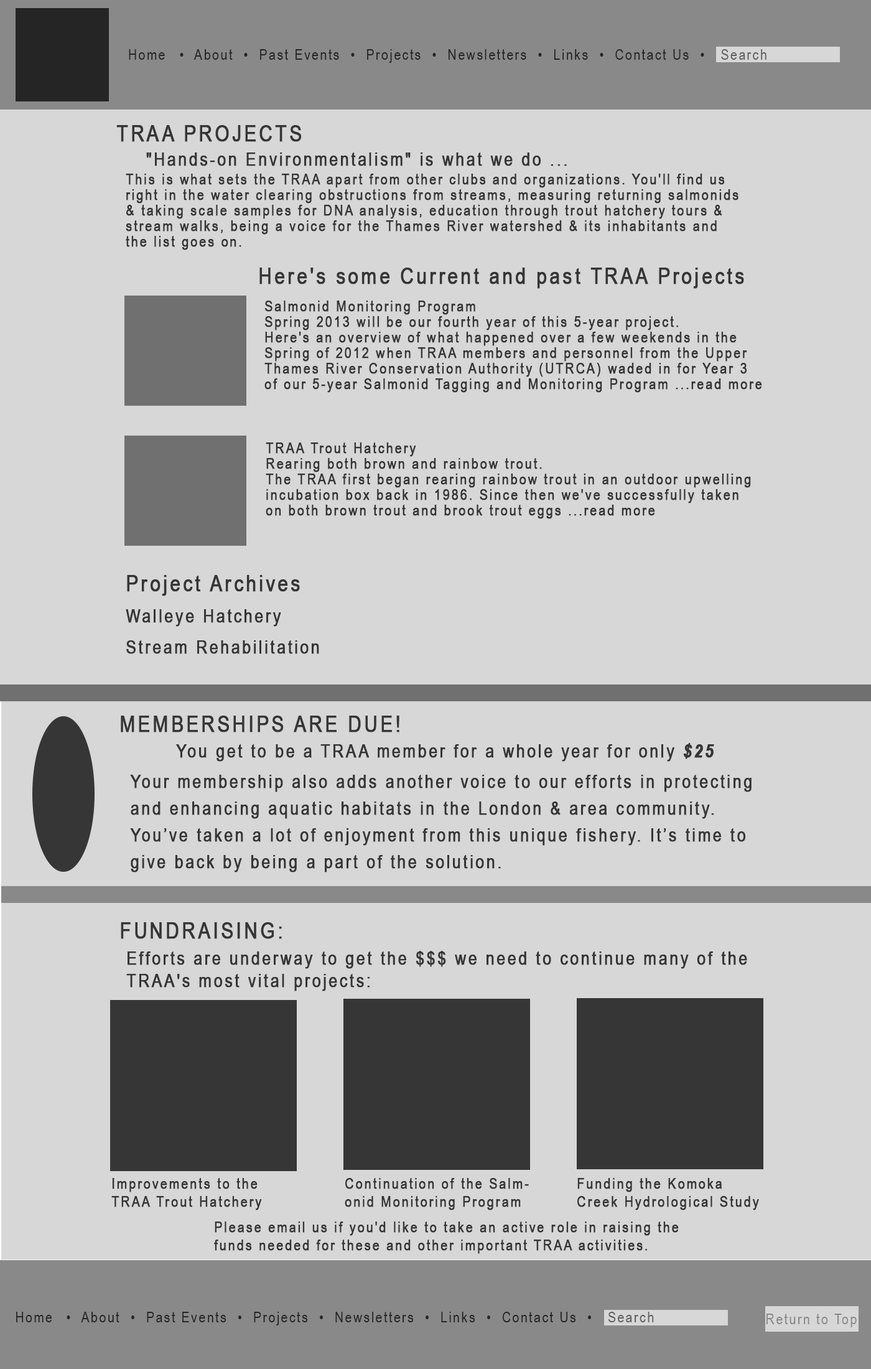
<style>
.page{position:relative;width:871px;height:1369px;background:#d7d7d7}
.page>*{position:absolute;margin:0}
.t1{font:14.9px "ArialNarrow";letter-spacing:0.1em;color:#252525}
.t2{font:14.9px "ArialNarrow";letter-spacing:0.1em;color:#5f5f5f}
.t3{font:22.4px "ArialNarrow";letter-spacing:0.1em;color:#363636;text-transform:uppercase;font-weight:bold}
.t4{font:18.7px "ArialNarrow";letter-spacing:0.1em;color:#363636;font-weight:bold}
.t5{font:14.9px/15.6px "ArialNarrow";letter-spacing:0.1em;color:#363636;font-weight:bold}
.t6{font:22.4px "ArialNarrow";letter-spacing:0.1em;color:#363636;font-weight:bold}
.t7{font:18.7px/15.6px "ArialNarrow";letter-spacing:0.1em;color:#363636;font-weight:bold}
.t8{font:22.4px/15.6px "ArialNarrow";letter-spacing:0.1em;color:#363636;font-weight:bold}
.t9{font:18.7px "ArialNarrow-BoldItalic";letter-spacing:0.1em;color:#363636;font-weight:bold}
.t10{font:18.7px/26.8px "ArialNarrow";letter-spacing:0.1em;color:#363636;font-weight:bold}
.t11{font:14.9px "ArialNarrow";letter-spacing:0.1em;color:#363636;font-weight:bold}
.t12{font:14.9px "ArialNarrow";letter-spacing:0.1em;color:#898989}
.t13{font:10px "ArialNarrow";letter-spacing:0.1em;color:#898989}
</style>
<div class="page">
<p class="t1" style="left:129px;top:49px;width:638px;height:14px">Home  •  About  •  Past Events  •  Projects  •  Newsletters  •  Links  •  Contact Us  •   <span class="t2">Search</span></p>
<p class="t3" style="left:116px;top:125px;width:186px;height:17px">TRAA Projects</p>
<p class="t4" style="left:146px;top:152px;width:421px;height:14px">"Hands-on Environmentalism" is what we do ...</p>
<p class="t5" style="left:126px;top:174px;width:613px;height:76px">This is what sets the TRAA apart from other clubs and organizations. You'll find us <br>right in the water clearing obstructions from streams, measuring returning salmonids<br>&amp; taking scale samples for DNA analysis, education through trout hatchery tours &amp; <br>stream walks, being a voice for the Thames River watershed &amp; its inhabitants and <br>the list goes on.</p>
<p class="t6" style="left:259px;top:268px;width:485px;height:21px">Here's some Current and past TRAA Projects</p>
<p class="t5" style="left:264px;top:301px;width:498px;height:92px">Salmonid Monitoring Program<br>Spring 2013 will be our fourth year of this 5-year project.<br>Here's an overview of what happened over a few weekends in the <br>Spring of 2012 when TRAA members and personnel from the Upper <br>Thames River Conservation Authority (UTRCA) waded in for Year 3 <br>of our 5-year Salmonid Tagging and Monitoring Program ...read more</p>
<p class="t5" style="left:266px;top:442px;width:485px;height:77px">TRAA Trout Hatchery<br>Rearing both brown and rainbow trout.<br>The TRAA first began rearing rainbow trout in an outdoor upwelling <br>incubation box back in 1986. Since then we've successfully taken <br>on both brown trout and brook trout eggs ...read more</p>
<p class="t7" style="left:126px;top:575px;width:193px;height:79px"><span class="t8">Project Archives<br><br></span>Walleye Hatchery<br><br>Stream Rehabilitation</p>
<p class="t6" style="left:121px;top:716px;width:278px;height:16px">MEMBERSHIPS ARE DUE!</p>
<p class="t4" style="left:176px;top:743px;width:538px;height:19px">You get to be a TRAA member for a whole year for only <span class="t9">$25</span></p>
<p class="t10" style="left:130px;top:775px;width:622px;height:97px">Your membership also adds another voice to our efforts in protecting <br>and enhancing aquatic habitats in the London &amp; area community.<br>You’ve taken a lot of enjoyment from this unique fishery. It’s time to<br>give back by being a part of the solution.</p>
<p class="t6" style="left:121px;top:922px;width:161px;height:17px">FUNDRAISING:</p>
<p class="t4" style="left:126px;top:951px;width:621px;height:40px">Efforts are underway to get the $$$ we need to continue many of the<br>TRAA's most vital projects:</p>
<p class="t11" style="left:111px;top:1178px;width:151px;height:32px">Improvements to the<br>TRAA Trout Hatchery</p>
<p class="t11" style="left:345px;top:1178px;width:184px;height:32px">Continuation of the Salm-<br>onid Monitoring Program</p>
<p class="t11" style="left:577px;top:1178px;width:182px;height:32px">Funding the Komoka<br>Creek Hydrological Study</p>
<p class="t11" style="left:214px;top:1221px;width:465px;height:33px">Please email us if you'd like to take an active role in raising the <br>funds needed for these and other important TRAA activities.</p>
<p class="t1" style="left:16px;top:1312px;width:638px;height:13px">Home  •  About  •  Past Events  •  Projects  •  Newsletters  •  Links  •  Contact Us  •   <span class="t2">Search</span></p>
<p class="t12" style="left:767px;top:1313px;width:90px;height:14px"><span class="t13"><br></span>Return to Top</p>
</div>
